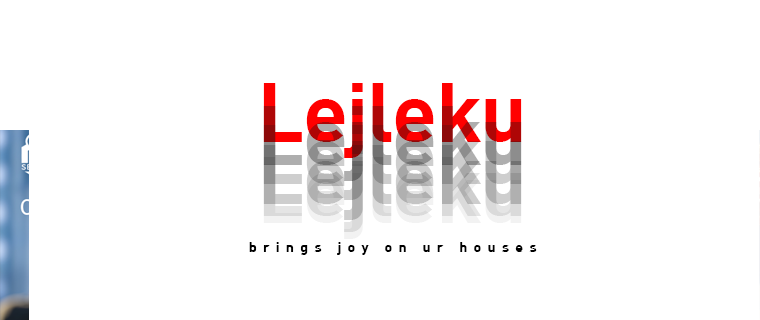
<style>
.page{position:relative;width:760px;height:320px;background:#ffffff}
.page>*{position:absolute;margin:0}
.t1{font:82.3px "DINBold";letter-spacing:-0.02em;color:#ff0000}
.t2{font:82.3px "DINBold";letter-spacing:-0.02em}
.t3{font:14.2px "DINBold";letter-spacing:0.44em;color:#000000}
</style>
<div class="page">
<p class="t1" style="left:263px;top:83px;width:259px;height:75px">Lejleku</p>
<p class="t2" style="left:263px;top:106px;width:259px;height:75px">Lejleku</p>
<p class="t2" style="left:263px;top:125px;width:259px;height:75px">Lejleku</p>
<p class="t2" style="left:263px;top:145px;width:259px;height:75px">Lejleku</p>
<p class="t2" style="left:263px;top:157px;width:259px;height:75px">Lejleku</p>
<p class="t2" style="left:263px;top:164px;width:259px;height:75px">Lejleku</p>
<p class="t3" style="left:249px;top:242px;width:288px;height:13px">brings joy on ur houses</p>
</div>
